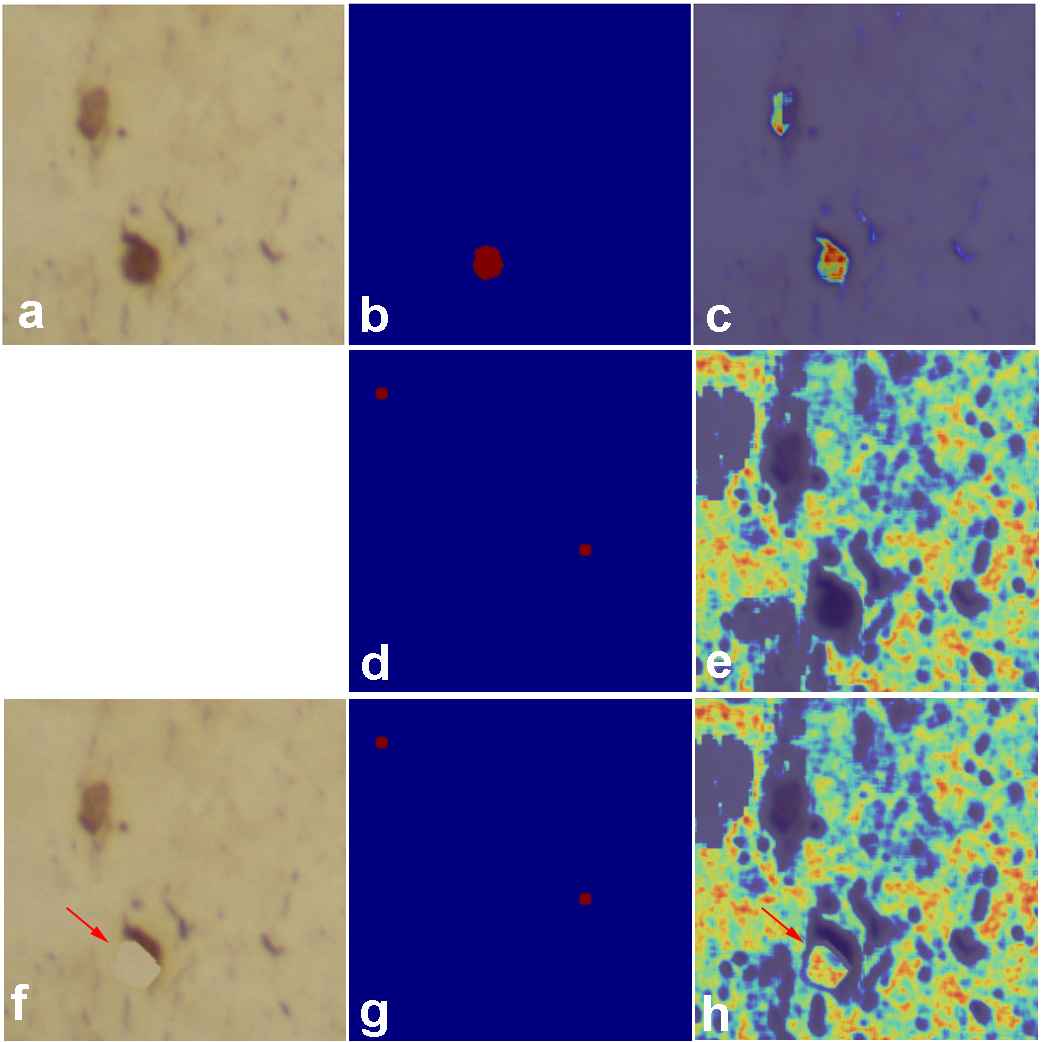
<style>
.page{position:relative;width:1045px;height:1042px;background:#00007f}
.page>*{position:absolute;margin:0}
.t1{font:50px "Arial-BoldMT";color:#ffffff}
</style>
<div class="page">
<p class="t1" style="left:19px;top:301px;width:25px;height:27px">a</p>
<p class="t1" style="left:362px;top:296px;width:26px;height:36px">b</p>
<p class="t1" style="left:707px;top:305px;width:24px;height:27px">c</p>
<p class="t1" style="left:362px;top:644px;width:26px;height:36px">d</p>
<p class="t1" style="left:707px;top:651px;width:24px;height:27px">e</p>
<p class="t1" style="left:11px;top:984px;width:18px;height:36px">f</p>
<p class="t1" style="left:361px;top:1000px;width:26px;height:37px">g</p>
<p class="t1" style="left:704px;top:995px;width:24px;height:36px">h</p>
</div>
